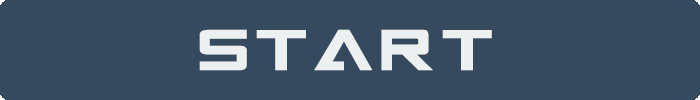
<style>
.page{position:relative;width:700px;height:100px;background:#35495f}
.page>*{position:absolute;margin:0}
.t1{font:50px "GAMECUBENDualSet";color:#edf0f1}
</style>
<div class="page">
<p class="t1" style="left:199px;top:29px;width:293px;height:42px">START</p>
</div>
